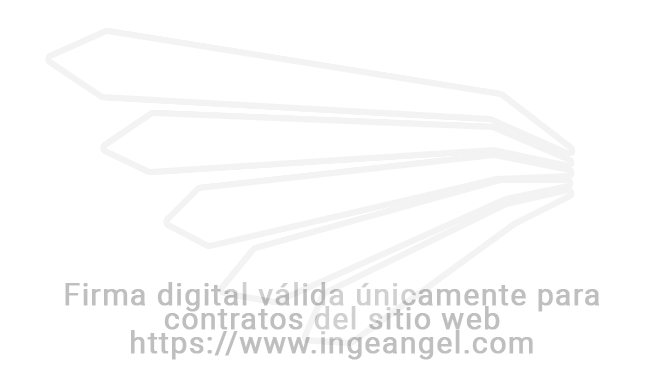
<style>
.page{position:relative;width:664px;height:376px;background:#ffffff}
.page>*{position:absolute;margin:0}
.t1{font:30px/24px "Roboto-Regular";letter-spacing:0.025em;color:#bfbfbf;font-weight:bold}
</style>
<div class="page">
<p class="t1" style="left:65px;top:282px;width:534px;height:78px;text-align:center">Firma digital válida únicamente para <br>contratos del sitio web  <br>https://www.ingeangel.com</p>
</div>
